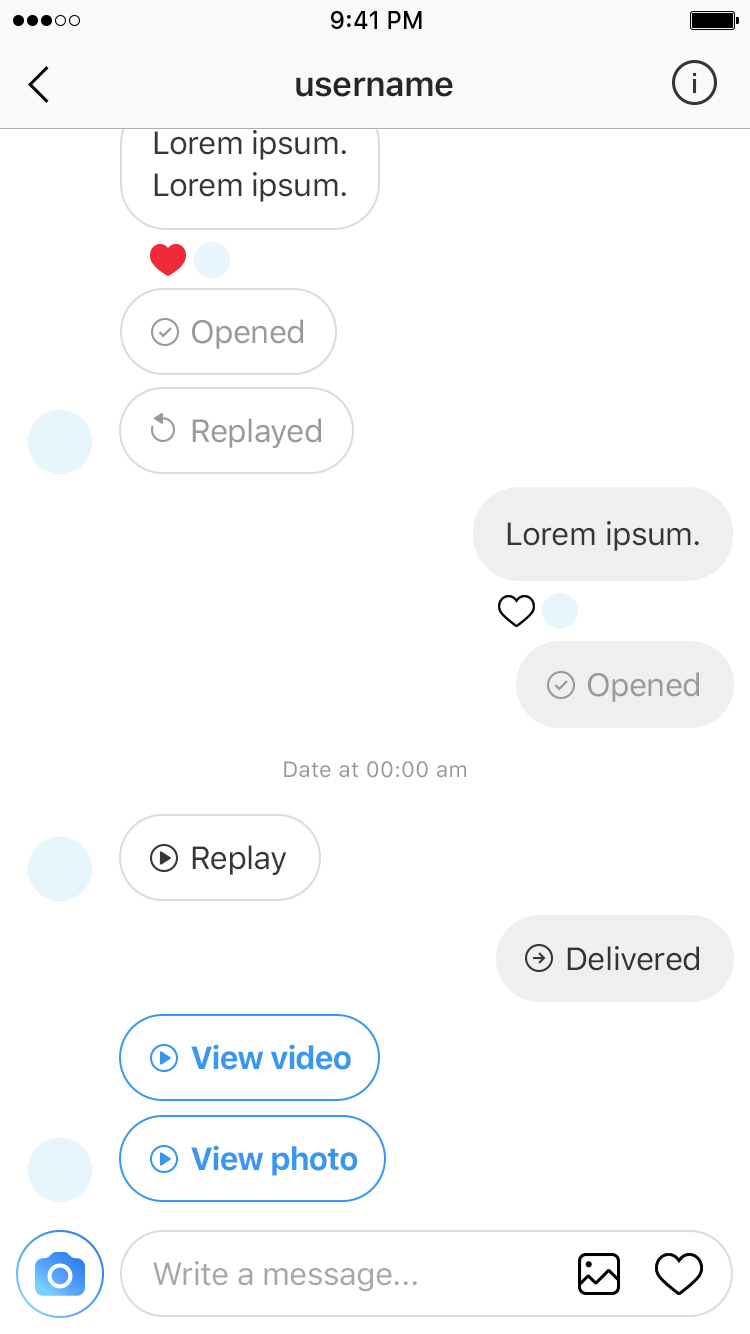
<style>
.page{position:relative;width:750px;height:1334px;background:#ffffff}
.page>*{position:absolute;margin:0}
.t1{font:34px "SFUIText-Semibold";letter-spacing:-0.025em;color:#262626}
.t2{font:32px/42px "SFUIText-Regular";letter-spacing:-0.02em;color:#363636}
.t3{font:32px "SFUIText-Regular";letter-spacing:-0.02em;color:#999999}
.t4{font:32px "SFUIText-Regular";letter-spacing:-0.02em;color:#363636}
.t5{font:22px "SFUIText-Regular";letter-spacing:0.015em;color:#999999}
.t6{font:32px "SFUIText-Regular";letter-spacing:-0.02em;color:#333333}
.t7{font:32px "SFUIText-Bold";letter-spacing:-0.04em;color:#3897f0}
.t8{font:32px "SFUIText-Regular";letter-spacing:-0.02em;color:#a5a7aa}
</style>
<div class="page">
<p class="t1" style="left:296px;top:77px;width:157px;height:20px">username</p>
<p class="t2" style="left:154px;top:130px;width:192px;height:72px">Lorem ipsum.<br>Lorem ipsum.</p>
<p class="t3" style="left:192px;top:319px;width:111px;height:30px">Opened</p>
<p class="t3" style="left:192px;top:418px;width:129px;height:30px">Replayed</p>
<p class="t4" style="left:507px;top:521px;width:192px;height:30px">Lorem ipsum.</p>
<p class="t3" style="left:588px;top:672px;width:111px;height:30px">Opened</p>
<p class="t5" style="left:284px;top:761px;width:182px;height:17px">Date at 00:00 am</p>
<p class="t4" style="left:192px;top:845px;width:95px;height:30px">Replay</p>
<p class="t6" style="left:567px;top:946px;width:132px;height:25px">Delivered</p>
<p class="t7" style="left:191px;top:1044px;width:160px;height:26px">View video</p>
<p class="t7" style="left:191px;top:1145px;width:167px;height:31px">View photo</p>
<p class="t8" style="left:153px;top:1261px;width:264px;height:31px">Write a message...</p>
</div>
